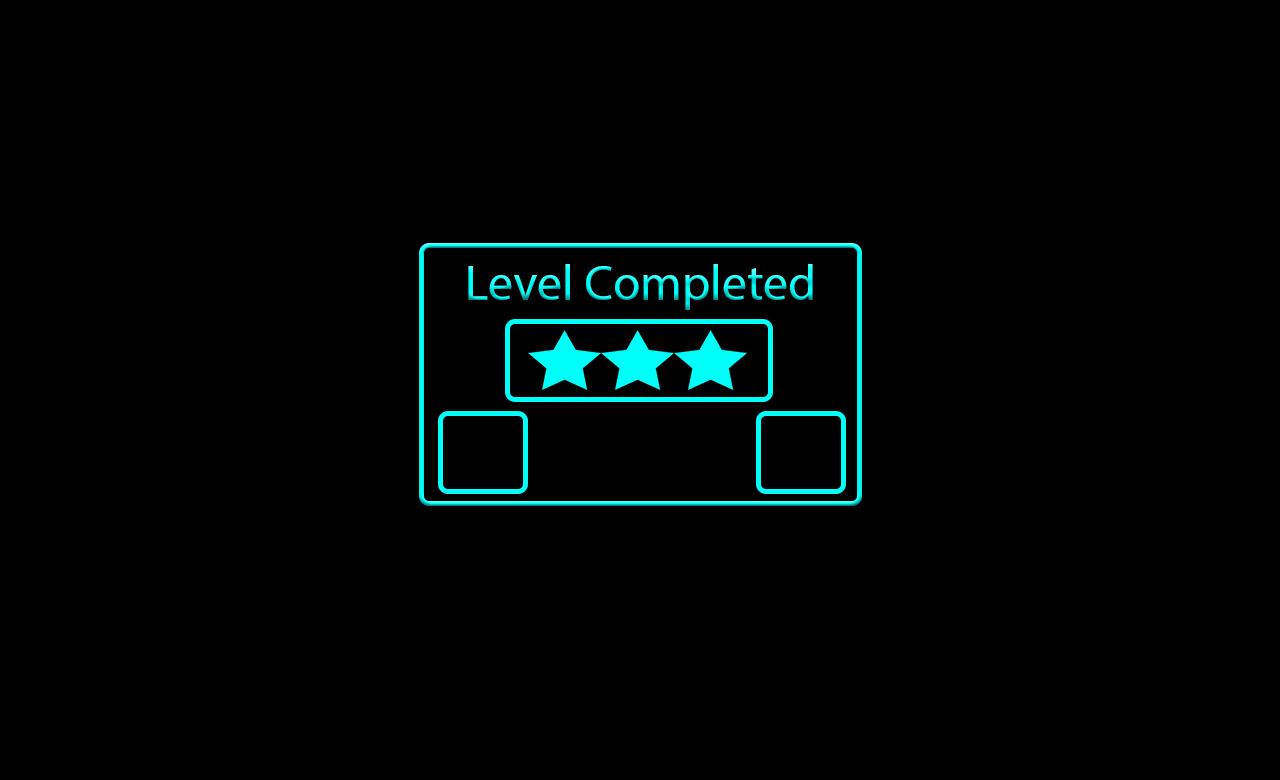
<style>
.page{position:relative;width:1280px;height:780px;background:#000000}
.page>*{position:absolute;margin:0}
.t1{font:12px "MyriadPro-Regular"}
</style>
<div class="page">
<p class="t1" style="left:468px;top:264px;width:345px;height:46px;text-align:center">Level Completed</p>
</div>
